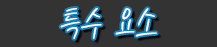
<style>
.page{position:relative;width:217px;height:47px;background:#333333}
.page>*{position:absolute;margin:0}
.t1{font:41.3px "KCC-eunyoung-Regular";color:#ffffff}
</style>
<div class="page">
<p class="t1" style="left:60px;top:8px;width:97px;height:31px">특수 요소</p>
</div>
